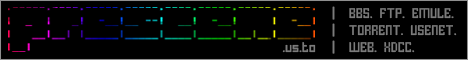
<style>
.page{position:relative;width:468px;height:60px;background:#000000}
.page>*{position:absolute;margin:0}
.t1{font:14px "HomespunTTBRK";color:#7b7b7b}
</style>
<div class="page">
<p class="t1" style="left:332px;top:6px;width:125px;height:48px">|  BBS. FTP. EMULE.<br>|  TORRENT. USENET.<br>|  WEB. XDCC.</p>
<p class="t1" style="left:282px;top:42px;width:34px;height:11px">.us.to</p>
</div>
